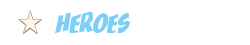
<style>
.page{position:relative;width:250px;height:45px;background:#ffffff}
.page>*{position:absolute;margin:0}
.t1{font:30px "HoustonComicsPersonalUse";color:#7ecef6}
</style>
<div class="page">
<p class="t1" style="left:55px;top:12px;width:75px;height:22px">HEROES</p>
</div>
